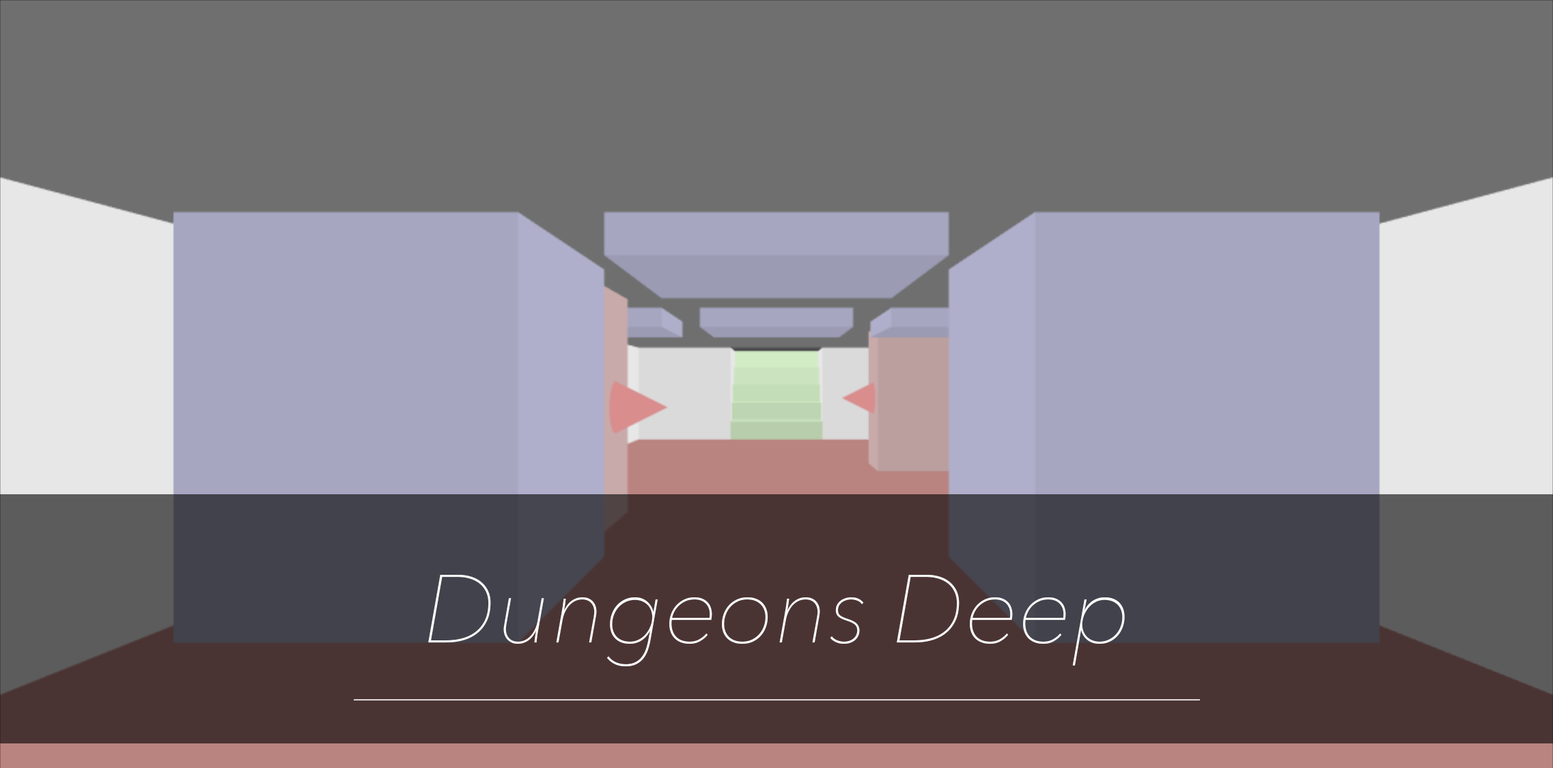
<style>
.page{position:relative;width:1553px;height:768px;background:#6f6f6f}
.page>*{position:absolute;margin:0}
.t1{font:95.8px "AvenirNext-UltraLightItalic";color:#fdfdfd}
</style>
<div class="page">
<p class="t1" style="left:428px;top:575px;width:696px;height:91px">Dungeons Deep</p>
</div>
